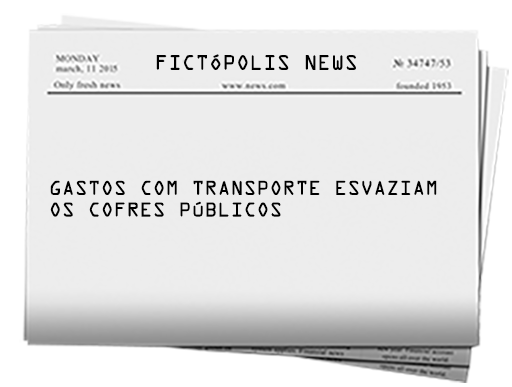
<style>
.page{position:relative;width:512px;height:387px;background:#ededed}
.page>*{position:absolute;margin:0}
.t1{font:18.8px "OCRAStd";color:#000000}
.t2{font:18px "OCRAStd";color:#000000}
</style>
<div class="page">
<p class="t1" style="left:156px;top:54px;width:200px;height:16px">FICTÓPOLIS NEWS</p>
<p class="t2" style="left:50px;top:180px;width:387px;height:37px">GASTOS COM TRANSPORTE ESVAZIAM<br>OS COFRES PÚBLICOS</p>
</div>
